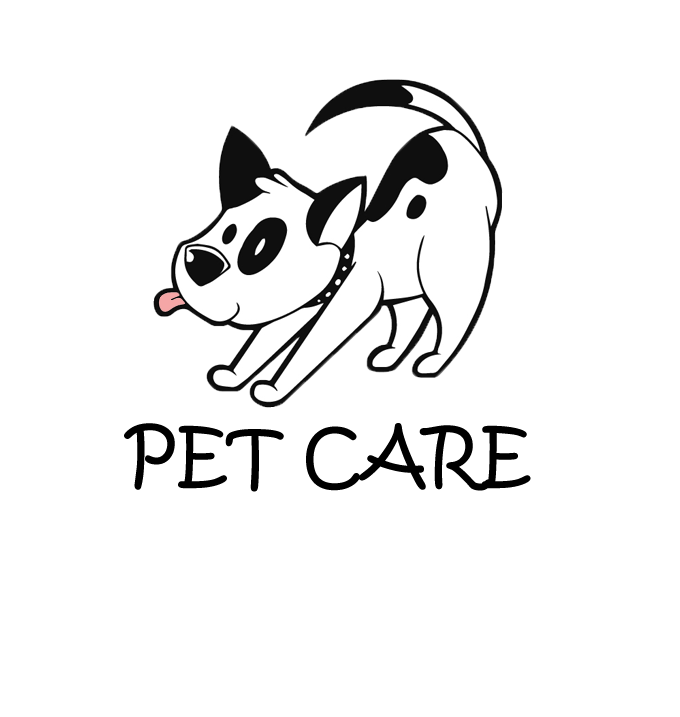
<style>
.page{position:relative;width:680px;height:717px;background:#ffffff}
.page>*{position:absolute;margin:0}
.t1{font:72px "KristenITC-Regular";color:#000000}
</style>
<div class="page">
<p class="t1" style="left:124px;top:423px;width:407px;height:69px">PET CARE</p>
</div>
